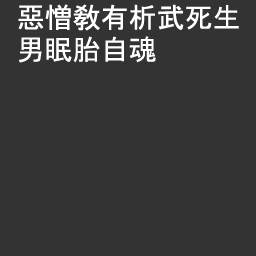
<style>
.page{position:relative;width:256px;height:256px;background:#333333}
.page>*{position:absolute;margin:0}
.t1{font:28px "MS-Gothic";color:#ffffff}
</style>
<div class="page">
<p class="t1" style="left:18px;top:4px;width:221px;height:59px">惡憎敎有析武死生<br>男眠胎自魂</p>
</div>
